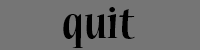
<style>
.page{position:relative;width:200px;height:50px;background:#757575}
.page>*{position:absolute;margin:0}
.t1{font:50px "NuevaStd-BoldCond";color:#000000}
</style>
<div class="page">
<p class="t1" style="left:63px;top:7px;width:72px;height:41px">quit</p>
</div>
